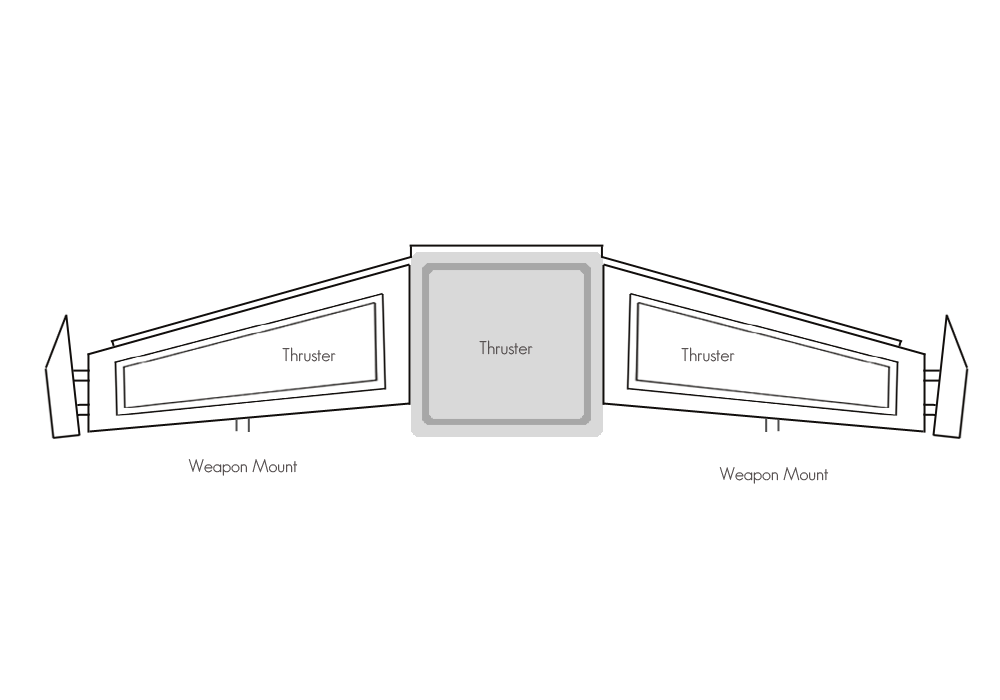
<style>
.page{position:relative;width:1000px;height:700px;background:#ffffff}
.page>*{position:absolute;margin:0}
.t1{font:18px "GeosansLight";letter-spacing:-0.005em;color:#4d4747}
</style>
<div class="page">
<p class="t1" style="left:479px;top:340px;width:54px;height:15px">Thruster</p>
<p class="t1" style="left:282px;top:347px;width:54px;height:15px">Thruster</p>
<p class="t1" style="left:681px;top:347px;width:54px;height:15px">Thruster</p>
<p class="t1" style="left:188px;top:459px;width:110px;height:17px">Weapon Mount</p>
<p class="t1" style="left:719px;top:467px;width:110px;height:17px">Weapon Mount</p>
</div>
